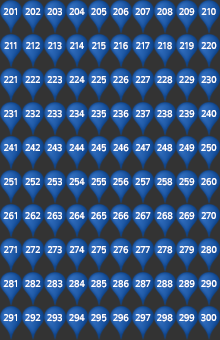
<style>
.page{position:relative;width:220px;height:340px;background:#333333}
.page>*{position:absolute;margin:0}
.t1{font:10px "Arita-dotum-Bold_TTF";letter-spacing:-0.05em;color:#ffffff;scale:0.95 1}
</style>
<div class="page">
<p class="t1" style="left:3px;top:8px;width:14px;height:7px">201</p>
<p class="t1" style="left:25px;top:8px;width:16px;height:7px">202</p>
<p class="t1" style="left:47px;top:8px;width:15px;height:8px">203</p>
<p class="t1" style="left:69px;top:8px;width:16px;height:7px">204</p>
<p class="t1" style="left:91px;top:8px;width:16px;height:8px">205</p>
<p class="t1" style="left:113px;top:8px;width:16px;height:8px">206</p>
<p class="t1" style="left:135px;top:8px;width:15px;height:7px">207</p>
<p class="t1" style="left:157px;top:8px;width:16px;height:8px">208</p>
<p class="t1" style="left:179px;top:8px;width:16px;height:8px">209</p>
<p class="t1" style="left:201px;top:8px;width:15px;height:7px">210</p>
<p class="t1" style="left:4px;top:42px;width:13px;height:7px">211</p>
<p class="t1" style="left:26px;top:42px;width:14px;height:7px">212</p>
<p class="t1" style="left:48px;top:42px;width:14px;height:8px">213</p>
<p class="t1" style="left:70px;top:42px;width:14px;height:7px">214</p>
<p class="t1" style="left:92px;top:42px;width:14px;height:8px">215</p>
<p class="t1" style="left:113px;top:42px;width:15px;height:8px">216</p>
<p class="t1" style="left:136px;top:42px;width:14px;height:7px">217</p>
<p class="t1" style="left:157px;top:42px;width:15px;height:8px">218</p>
<p class="t1" style="left:179px;top:42px;width:15px;height:8px">219</p>
<p class="t1" style="left:201px;top:42px;width:16px;height:7px">220</p>
<p class="t1" style="left:4px;top:76px;width:13px;height:7px">221</p>
<p class="t1" style="left:25px;top:76px;width:15px;height:7px">222</p>
<p class="t1" style="left:47px;top:76px;width:15px;height:8px">223</p>
<p class="t1" style="left:69px;top:76px;width:16px;height:7px">224</p>
<p class="t1" style="left:91px;top:76px;width:15px;height:8px">225</p>
<p class="t1" style="left:113px;top:76px;width:16px;height:8px">226</p>
<p class="t1" style="left:135px;top:76px;width:15px;height:7px">227</p>
<p class="t1" style="left:157px;top:76px;width:16px;height:8px">228</p>
<p class="t1" style="left:179px;top:76px;width:16px;height:8px">229</p>
<p class="t1" style="left:201px;top:76px;width:16px;height:8px">230</p>
<p class="t1" style="left:4px;top:110px;width:13px;height:8px">231</p>
<p class="t1" style="left:25px;top:110px;width:15px;height:8px">232</p>
<p class="t1" style="left:47px;top:110px;width:15px;height:8px">233</p>
<p class="t1" style="left:69px;top:110px;width:16px;height:8px">234</p>
<p class="t1" style="left:91px;top:110px;width:15px;height:8px">235</p>
<p class="t1" style="left:113px;top:110px;width:16px;height:8px">236</p>
<p class="t1" style="left:135px;top:110px;width:15px;height:8px">237</p>
<p class="t1" style="left:157px;top:110px;width:16px;height:8px">238</p>
<p class="t1" style="left:179px;top:110px;width:16px;height:8px">239</p>
<p class="t1" style="left:201px;top:110px;width:16px;height:7px">240</p>
<p class="t1" style="left:4px;top:144px;width:13px;height:7px">241</p>
<p class="t1" style="left:25px;top:144px;width:15px;height:7px">242</p>
<p class="t1" style="left:47px;top:144px;width:15px;height:8px">243</p>
<p class="t1" style="left:69px;top:144px;width:16px;height:7px">244</p>
<p class="t1" style="left:91px;top:144px;width:15px;height:8px">245</p>
<p class="t1" style="left:113px;top:144px;width:16px;height:8px">246</p>
<p class="t1" style="left:135px;top:144px;width:15px;height:7px">247</p>
<p class="t1" style="left:157px;top:144px;width:16px;height:8px">248</p>
<p class="t1" style="left:179px;top:144px;width:16px;height:8px">249</p>
<p class="t1" style="left:201px;top:144px;width:16px;height:8px">250</p>
<p class="t1" style="left:4px;top:178px;width:13px;height:8px">251</p>
<p class="t1" style="left:25px;top:178px;width:15px;height:8px">252</p>
<p class="t1" style="left:47px;top:178px;width:15px;height:8px">253</p>
<p class="t1" style="left:69px;top:178px;width:16px;height:8px">254</p>
<p class="t1" style="left:91px;top:178px;width:15px;height:8px">255</p>
<p class="t1" style="left:113px;top:178px;width:16px;height:8px">256</p>
<p class="t1" style="left:135px;top:178px;width:15px;height:8px">257</p>
<p class="t1" style="left:157px;top:178px;width:16px;height:8px">258</p>
<p class="t1" style="left:179px;top:178px;width:16px;height:8px">259</p>
<p class="t1" style="left:201px;top:178px;width:16px;height:8px">260</p>
<p class="t1" style="left:3px;top:212px;width:14px;height:8px">261</p>
<p class="t1" style="left:25px;top:212px;width:16px;height:8px">262</p>
<p class="t1" style="left:47px;top:212px;width:15px;height:8px">263</p>
<p class="t1" style="left:69px;top:212px;width:16px;height:8px">264</p>
<p class="t1" style="left:91px;top:212px;width:16px;height:8px">265</p>
<p class="t1" style="left:113px;top:212px;width:16px;height:8px">266</p>
<p class="t1" style="left:135px;top:212px;width:16px;height:8px">267</p>
<p class="t1" style="left:157px;top:212px;width:16px;height:8px">268</p>
<p class="t1" style="left:179px;top:212px;width:16px;height:8px">269</p>
<p class="t1" style="left:201px;top:212px;width:15px;height:7px">270</p>
<p class="t1" style="left:4px;top:246px;width:13px;height:7px">271</p>
<p class="t1" style="left:25px;top:246px;width:15px;height:7px">272</p>
<p class="t1" style="left:47px;top:246px;width:15px;height:8px">273</p>
<p class="t1" style="left:69px;top:246px;width:16px;height:7px">274</p>
<p class="t1" style="left:91px;top:246px;width:15px;height:8px">275</p>
<p class="t1" style="left:113px;top:246px;width:16px;height:8px">276</p>
<p class="t1" style="left:135px;top:246px;width:15px;height:7px">277</p>
<p class="t1" style="left:157px;top:246px;width:16px;height:8px">278</p>
<p class="t1" style="left:179px;top:246px;width:15px;height:8px">279</p>
<p class="t1" style="left:201px;top:246px;width:16px;height:8px">280</p>
<p class="t1" style="left:3px;top:280px;width:14px;height:8px">281</p>
<p class="t1" style="left:25px;top:280px;width:16px;height:8px">282</p>
<p class="t1" style="left:47px;top:280px;width:16px;height:8px">283</p>
<p class="t1" style="left:69px;top:280px;width:16px;height:8px">284</p>
<p class="t1" style="left:91px;top:280px;width:16px;height:8px">285</p>
<p class="t1" style="left:113px;top:280px;width:16px;height:8px">286</p>
<p class="t1" style="left:135px;top:280px;width:16px;height:8px">287</p>
<p class="t1" style="left:157px;top:280px;width:16px;height:8px">288</p>
<p class="t1" style="left:179px;top:280px;width:16px;height:8px">289</p>
<p class="t1" style="left:201px;top:280px;width:16px;height:8px">290</p>
<p class="t1" style="left:3px;top:314px;width:14px;height:8px">291</p>
<p class="t1" style="left:25px;top:314px;width:16px;height:8px">292</p>
<p class="t1" style="left:47px;top:314px;width:15px;height:8px">293</p>
<p class="t1" style="left:69px;top:314px;width:16px;height:8px">294</p>
<p class="t1" style="left:91px;top:314px;width:16px;height:8px">295</p>
<p class="t1" style="left:113px;top:314px;width:16px;height:8px">296</p>
<p class="t1" style="left:135px;top:314px;width:16px;height:8px">297</p>
<p class="t1" style="left:157px;top:314px;width:16px;height:8px">298</p>
<p class="t1" style="left:179px;top:314px;width:16px;height:8px">299</p>
<p class="t1" style="left:201px;top:314px;width:16px;height:8px">300</p>
</div>
